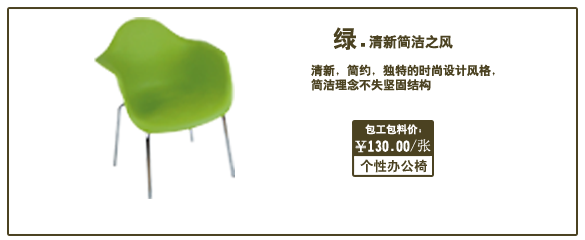
<style>
.page{position:relative;width:585px;height:240px;background:#ffffff}
.page>*{position:absolute;margin:0}
.t1{font:14px "HeitiCSEG";color:#4b4221}
.t2{font:24px "HeitiCSEG";color:#4b4221}
.t3{font:12px "HeitiCSEG";color:#4b4221}
.t4{font:10.5px "HeitiCSEG";color:#fffefe}
.t5{font:14px "HeitiCSEG";color:#ffffff}
.t6{font:14px "SimSun";color:#ffffff}
.t7{font:13.5px "HeitiCSEG";color:#4b4221}
</style>
<div class="page">
<p class="t1" style="left:333px;top:27px;width:120px;height:23px"><span class="t2">绿.</span>清新简洁之风</p>
<p class="t3" style="left:311px;top:64px;width:184px;height:27px">清新，简约，独特的时尚设计风格，<br>简洁理念不失坚固结构</p>
<p class="t4" style="left:365px;top:124px;width:56px;height:11px">包工包料价：</p>
<p class="t5" style="left:355px;top:139px;width:76px;height:14px">￥130.00<span class="t6">/张</span></p>
<p class="t7" style="left:360px;top:159px;width:67px;height:14px">个性办公椅</p>
</div>
